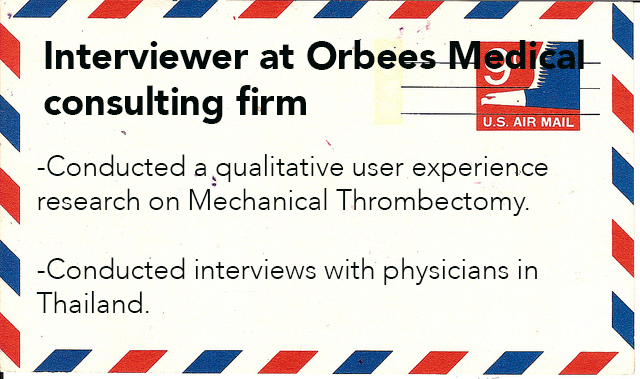
<style>
.page{position:relative;width:640px;height:379px}
.page>*{position:absolute;margin:0}
.t1{font:38.7px "Avenir-Black";color:#030a0a}
.t2{font:28.5px "Avenir-Light";color:#030a0a}
</style>
<div class="page">
<p class="t1" style="left:44px;top:39px;width:540px;height:85px">Interviewer at Orbees Medical <br>consulting firm</p>
<p class="t2" style="left:36px;top:154px;width:512px;height:159px">-Conducted a qualitative user experience <br>research on Mechanical Thrombectomy.<br><br>-Conducted interviews with physicians in<br>Thailand.</p>
</div>
